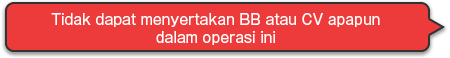
<style>
.page{position:relative;width:450px;height:58px;background:#ed3b3b}
.page>*{position:absolute;margin:0}
.t1{font:14px/18px "GothicMB101Pro-Regular";color:#ffffff}
</style>
<div class="page">
<p class="t1" style="left:51px;top:13px;width:329px;height:32px;text-align:center">Tidak dapat menyertakan BB atau CV apapun<br>dalam operasi ini</p>
</div>
